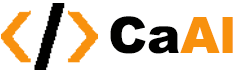
<style>
.page{position:relative;width:247px;height:72px;background:#ffffff}
.page>*{position:absolute;margin:0}
.t1{font:50px "Arial-Black";color:#010100}
.t2{font:50px "Arial-Black";color:#f8910e}
</style>
<div class="page">
<p class="t1" style="left:110px;top:16px;width:123px;height:38px">Ca<span class="t2">Al</span></p>
</div>
